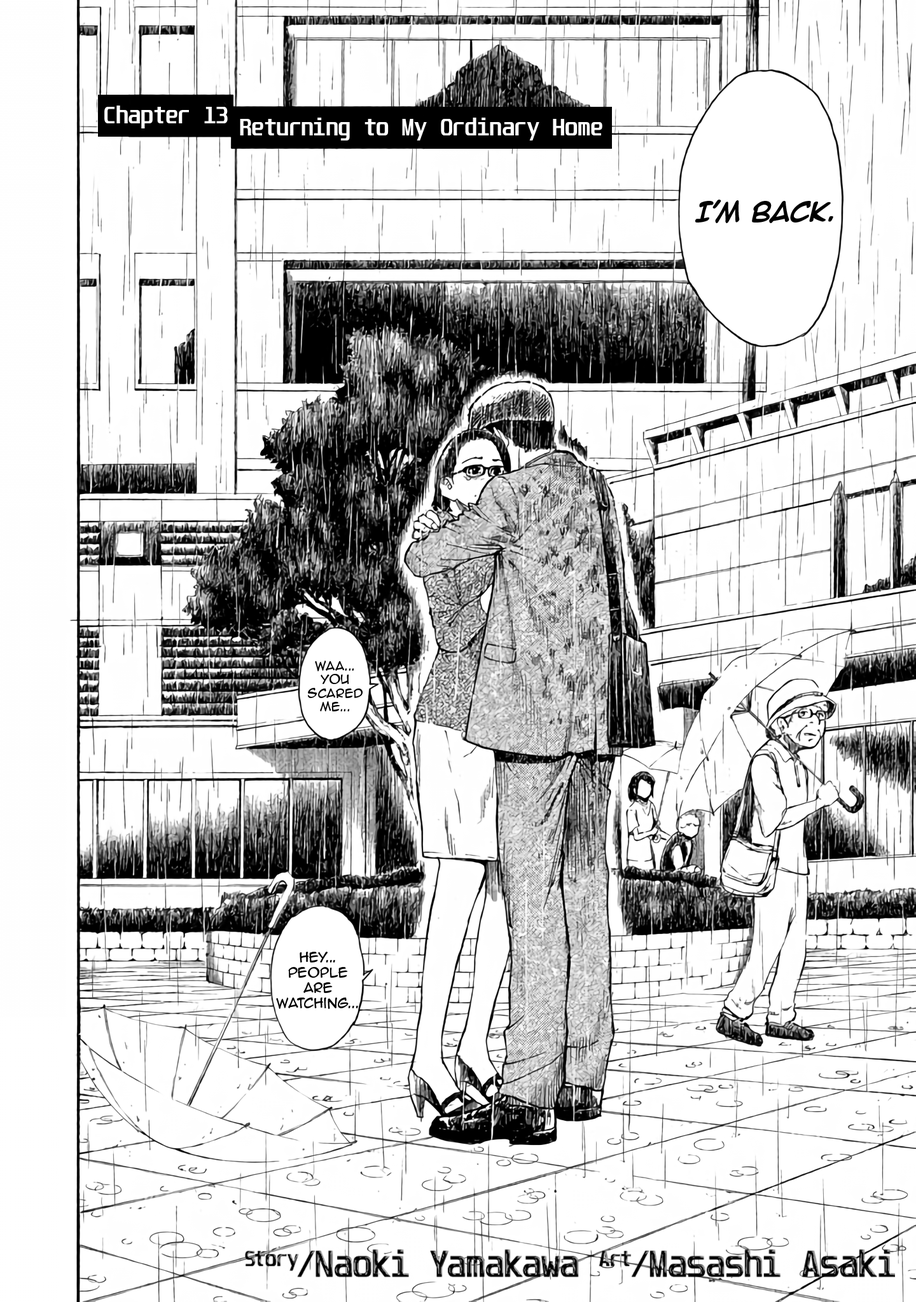
<style>
.page{position:relative;width:916px;height:1302px;background:#ffffff}
.page>*{position:absolute;margin:0}
.t1{font:21px "Unispace-Bold";color:#ffffff}
.t2{font:22.9px "AnimeAce2.0BB-Bold";color:#000000}
.t3{font:11.4px "AnimeAce2.0BB";color:#000000}
.t4{font:12.7px "AnimeAce2.0BB";color:#000000}
</style>
<div class="page">
<p class="t1" style="left:104px;top:106px;width:124px;height:22px">Chapter 13</p>
<p class="t1" style="left:240px;top:118px;width:362px;height:23px">Returning to My Ordinary Home</p>
<p class="t2" style="left:695px;top:200px;width:138px;height:23px">I’m Back.</p>
<p class="t3" style="left:308px;top:661px;width:54px;height:51px;text-align:center">waa... You scared me...</p>
<p class="t4" style="left:276px;top:952px;width:82px;height:57px;text-align:center">hey... People are watching...</p>
</div>
